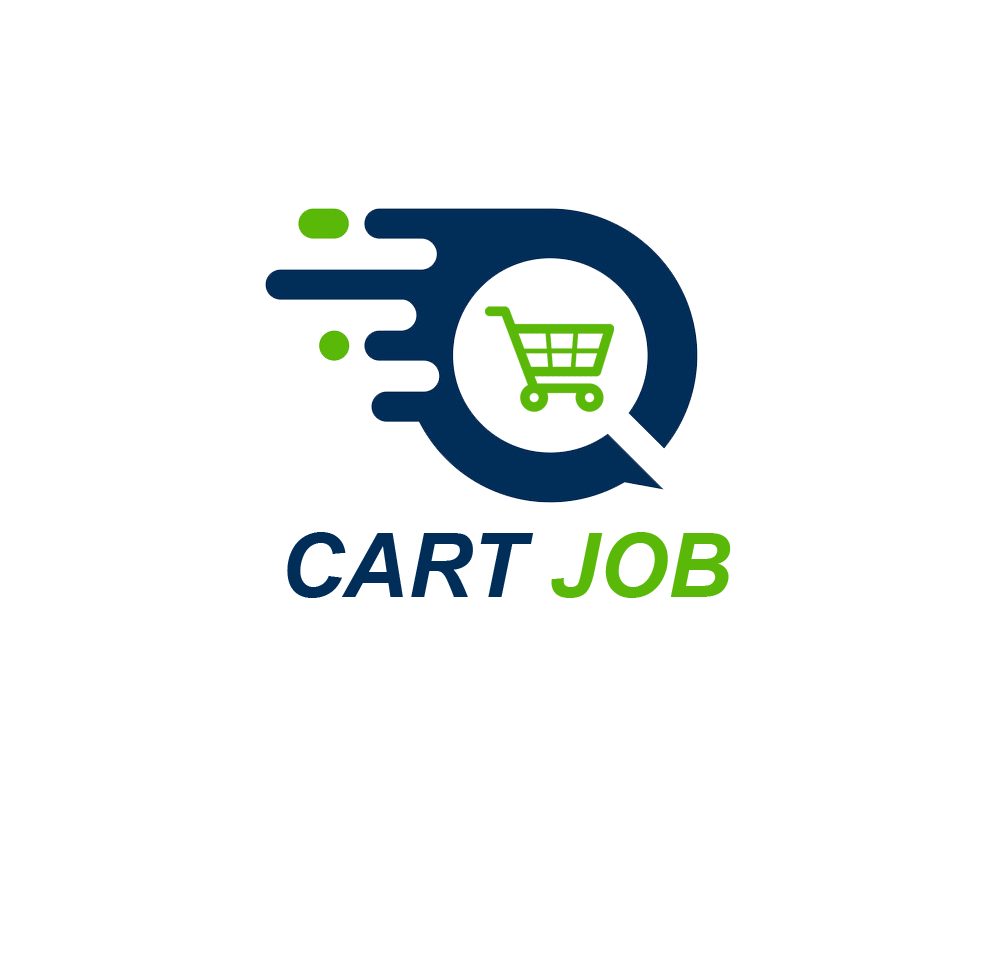
<style>
.page{position:relative;width:1000px;height:968px;background:#ffffff}
.page>*{position:absolute;margin:0}
.t1{font:88.8px "Arial-BoldItalicMT";color:#012e58}
.t2{font:88.8px "Arial-BoldItalicMT";color:#5ab808}
</style>
<div class="page">
<p class="t1" style="left:287px;top:532px;width:444px;height:66px">CART <span class="t2">JOB</span></p>
</div>
